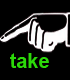
<style>
.page{position:relative;width:70px;height:80px;background:#000000}
.page>*{position:absolute;margin:0}
.t1{font:19.9px "Arial-BoldMT";color:#2cd909}
</style>
<div class="page">
<p class="t1" style="left:10px;top:53px;width:39px;height:15px">take</p>
</div>
